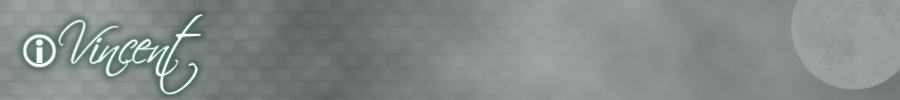
<style>
.page{position:relative;width:900px;height:100px}
.page>*{position:absolute;margin:0}
.t1{font:55px "Scriptina";color:#ffffff}
</style>
<div class="page">
<p class="t1" style="left:58px;top:14px;width:145px;height:80px">Vincent</p>
</div>
